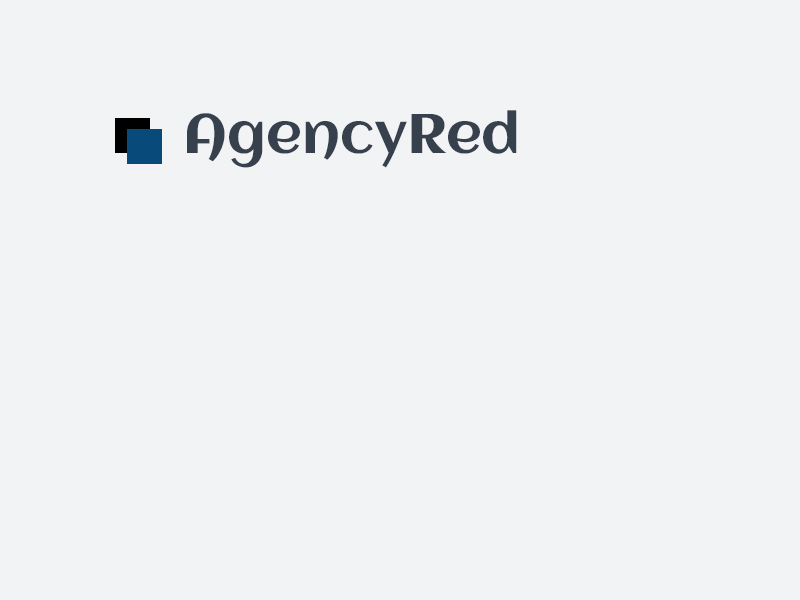
<style>
.page{position:relative;width:800px;height:600px;background:#f2f3f5}
.page>*{position:absolute;margin:0}
.t1{font:55.6px "Aclonica-Regular";color:#37404d}
</style>
<div class="page">
<p class="t1" style="left:187px;top:110px;width:330px;height:58px">AgencyRed</p>
</div>
